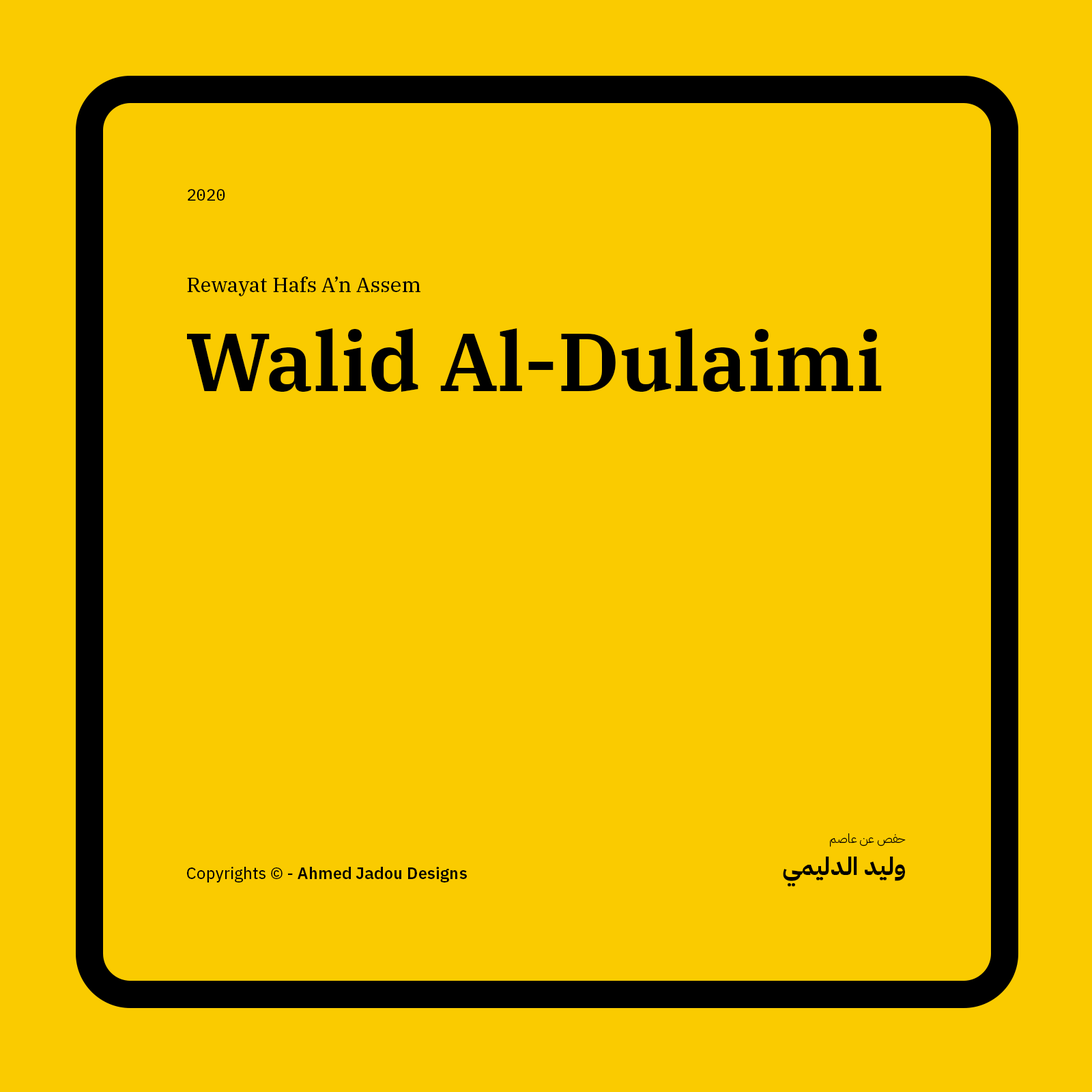
<style>
.page{position:relative;width:1092px;height:1092px;background:#facb00}
.page>*{position:absolute;margin:0}
.t1{font:16.4px "IBMPlexMono-Text";color:#000000}
.t2{font:20.5px "IBMPlexSerif-Text";color:#000000}
.t3{font:81.9px "IBMPlexSerif-SemiBold";color:#000000}
.t4{font:12.3px "IBMPlexArabic-Light";color:#000000}
.t5{font:24.6px "IBMPlexArabic-Bold";color:#000000}
.t6{font:16.4px "IBMPlexSans-SemiBold";color:#000000}
.t7{font:16.4px "IBMPlexSans-Text";color:#000000}
</style>
<div class="page">
<p class="t1" style="left:188px;top:189px;width:37px;height:12px">2020</p>
<p class="t2" style="left:187px;top:276px;width:233px;height:20px">Rewayat Hafs A’n Assem</p>
<p class="t3" style="left:187px;top:328px;width:695px;height:64px">Walid Al-Dulaimi</p>
<p class="t4" style="left:830px;top:833px;width:76px;height:14px">حفص عن عاصم</p>
<p class="t5" style="left:783px;top:857px;width:122px;height:30px">وليد الدليمي</p>
<p class="t6" style="left:187px;top:867px;width:280px;height:15px"><span class="t7">Copyrights © - </span>Ahmed Jadou Designs</p>
</div>
